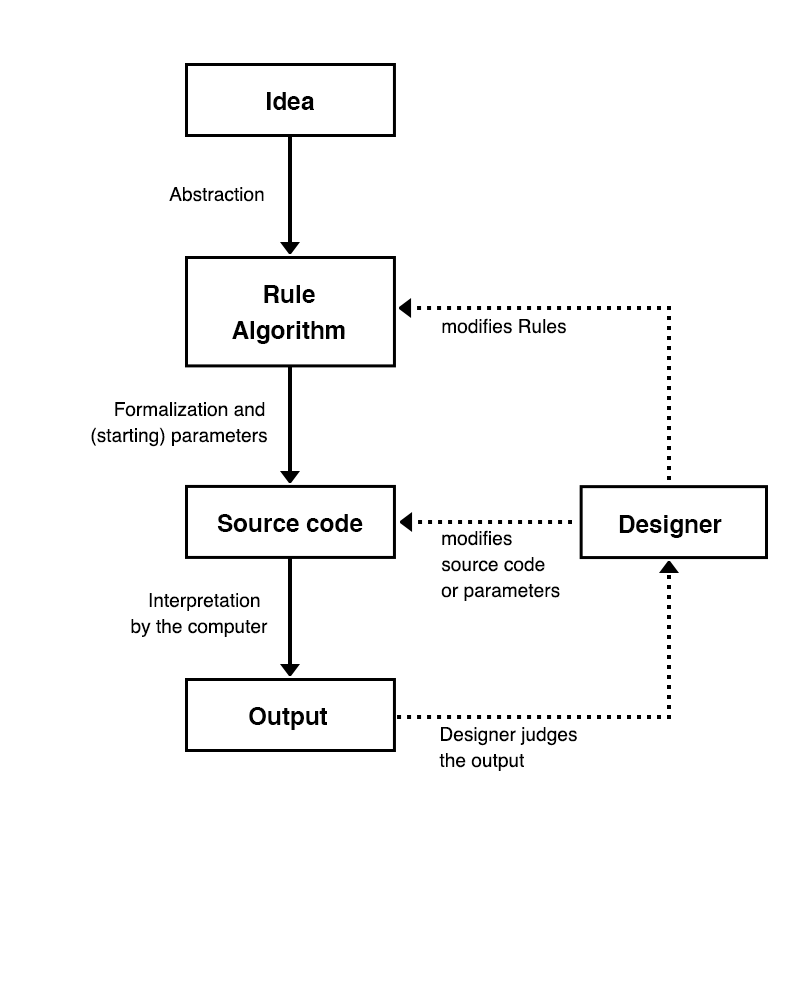
<style>
.page{position:relative;width:801px;height:1000px;background:#ffffff}
.page>*{position:absolute;margin:0}
.t1{font:24.3px "Helvetica-Bold";color:#000000}
.t2{font:19.1px "Helvetica";color:#000000}
.t3{font:24.3px/36.5px "Helvetica-Bold";color:#000000}
.t4{font:19.1px/26px "Helvetica";color:#000000}
</style>
<div class="page">
<p class="t1" style="left:267px;top:92px;width:47px;height:18px">Idea</p>
<p class="t2" style="left:169px;top:187px;width:95px;height:15px">Abstraction</p>
<p class="t3" style="left:232px;top:285px;width:113px;height:59px;text-align:center">Rule<br>Algorithm</p>
<p class="t2" style="left:442px;top:318px;width:125px;height:16px">modifies Rules</p>
<p class="t4" style="left:91px;top:402px;width:177px;height:45px;text-align:center">Formalization and (starting) parameters</p>
<p class="t1" style="left:217px;top:514px;width:146px;height:18px">Source code</p>
<p class="t1" style="left:619px;top:515px;width:103px;height:23px">Designer</p>
<p class="t4" style="left:441px;top:530px;width:119px;height:71px">modifies<br>source code <br>or parameters</p>
<p class="t4" style="left:131px;top:593px;width:137px;height:44px;text-align:center">Interpretation <br>by the computer</p>
<p class="t1" style="left:249px;top:707px;width:78px;height:23px">Output</p>
<p class="t4" style="left:439px;top:727px;width:138px;height:44px;text-align:center">Designer judges <br>the output</p>
</div>
